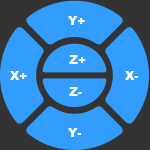
<style>
.page{position:relative;width:150px;height:150px;background:#329dfd}
.page>*{position:absolute;margin:0}
.t1{font:12px "Arial-Black";color:#ffffff}
</style>
<div class="page">
<p class="t1" style="left:68px;top:16px;width:17px;height:9px">Y+</p>
<p class="t1" style="left:69px;top:55px;width:17px;height:9px">Z+</p>
<p class="t1" style="left:10px;top:71px;width:17px;height:9px">X+</p>
<p class="t1" style="left:125px;top:71px;width:13px;height:9px">X-</p>
<p class="t1" style="left:69px;top:87px;width:13px;height:9px">Z-</p>
<p class="t1" style="left:68px;top:128px;width:13px;height:9px">Y-</p>
</div>
